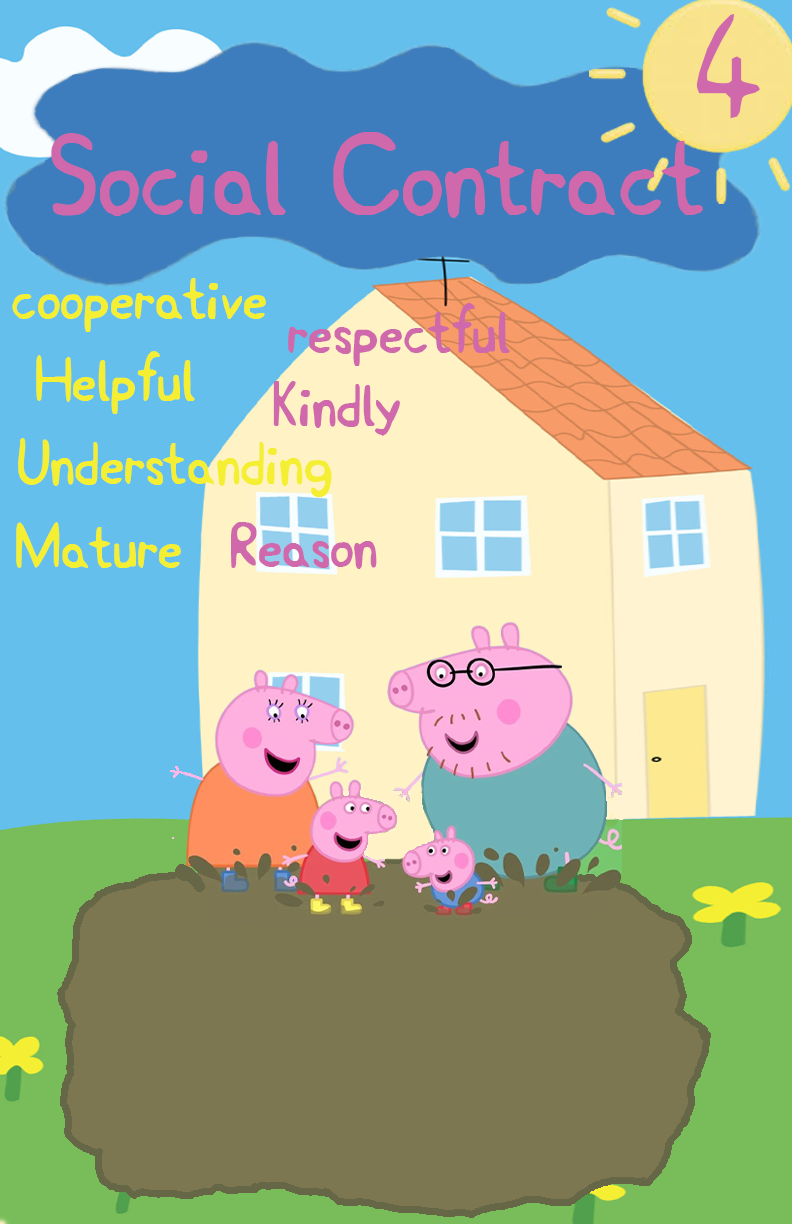
<style>
.page{position:relative;width:792px;height:1224px;background:#64bfec}
.page>*{position:absolute;margin:0}
.t1{font:112.9px "PeppaPig-Medium";color:#d069ac}
.t2{font:90px "PeppaPig-Medium";color:#d069ac}
.t3{font:50px "PeppaPig-Medium";color:#f4ef33}
.t4{font:50px "PeppaPig-Medium";color:#d069ac}
</style>
<div class="page">
<p class="t1" style="left:696px;top:14px;width:64px;height:104px">4</p>
<p class="t2" style="left:51px;top:132px;width:652px;height:86px">Social Contract</p>
<p class="t3" style="left:12px;top:278px;width:254px;height:54px">cooperative</p>
<p class="t4" style="left:288px;top:303px;width:222px;height:63px">respectful</p>
<p class="t3" style="left:36px;top:351px;width:159px;height:63px">Helpful</p>
<p class="t4" style="left:273px;top:381px;width:127px;height:55px">Kindly</p>
<p class="t3" style="left:18px;top:438px;width:314px;height:60px">Understanding</p>
<p class="t3" style="left:16px;top:522px;width:165px;height:46px">Mature</p>
<p class="t4" style="left:231px;top:522px;width:146px;height:47px">Reason</p>
</div>
